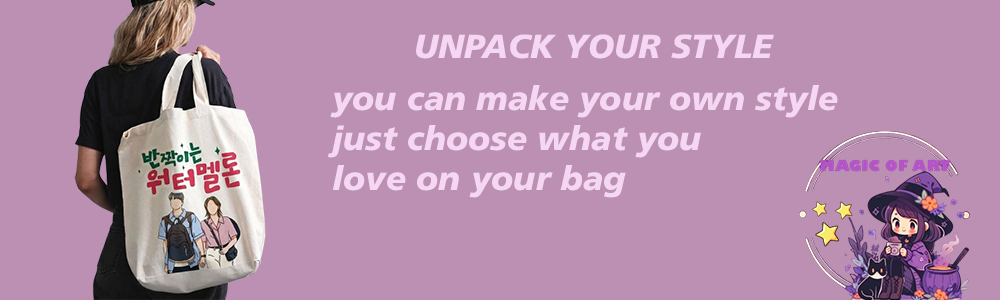
<style>
.page{position:relative;width:1000px;height:300px;background:#bb90b2}
.page>*{position:absolute;margin:0}
.t1{font:33.3px "ArticulateExtrabold-Italic";color:#f5d7f3}
</style>
<div class="page">
<p class="t1" style="left:416px;top:34px;width:358px;height:25px">UNPACK YOUR STYLE</p>
<p class="t1" style="left:328px;top:85px;width:510px;height:113px">you can make your own style <br>just choose what you <br>love on your bag</p>
</div>
